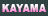
<style>
.page{position:relative;width:48px;height:16px;background:#314242}
.page>*{position:absolute;margin:0}
.t1{font:11px "Arial-Black";scale:0.85 1}
</style>
<div class="page">
<p class="t1" style="left:2px;top:4px;width:44px;height:8px">KAYAMA</p>
</div>
